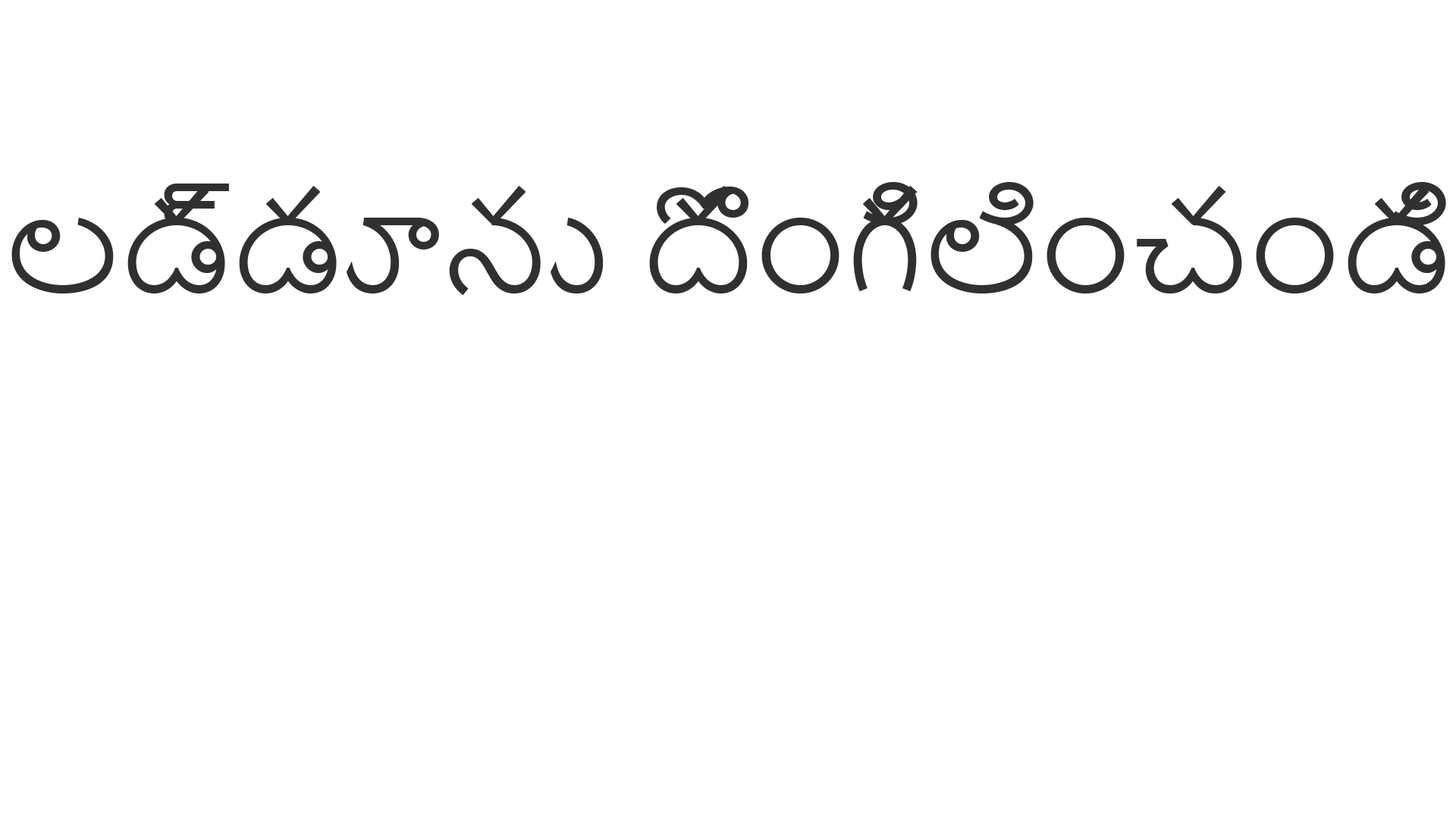
<style>
.page{position:relative;width:1456px;height:819px;background:#ffffff}
.page>*{position:absolute;margin:0}
.t1{font:125.1px "NirmalaUI";color:#303030}
</style>
<div class="page">
<p class="t1" style="left:11px;top:182px;width:1435px;height:114px">లడ్డూను దొంగిలించండి</p>
</div>
